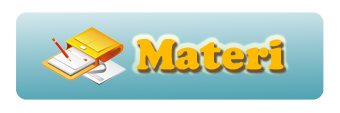
<style>
.page{position:relative;width:340px;height:113px;background:#ffffff}
.page>*{position:absolute;margin:0}
.t1{font:44.3px "CooperBlack";color:#ffbb00}
</style>
<div class="page">
<p class="t1" style="left:136px;top:39px;width:148px;height:31px">Materi</p>
</div>
